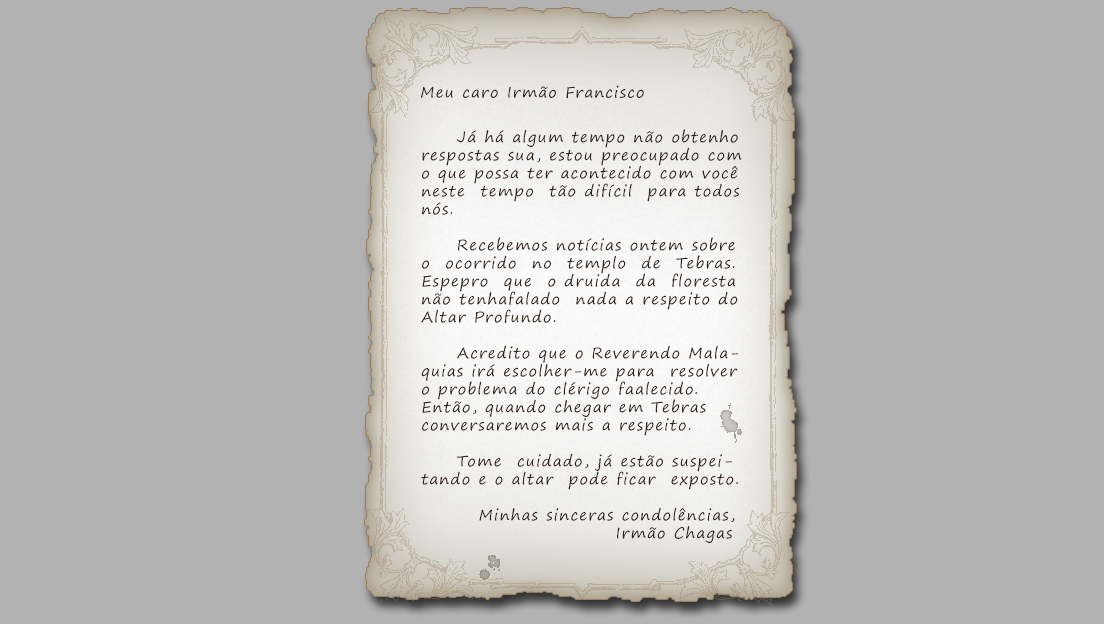
<style>
.page{position:relative;width:1104px;height:624px;background:#b2b2b2}
.page>*{position:absolute;margin:0}
.t1{font:15px "SegoePrint";letter-spacing:0.08em;color:#33241b}
</style>
<div class="page">
<p class="t1" style="left:421px;top:85px;width:223px;height:14px">Meu caro Irmão Francisco</p>
<p class="t1" style="left:421px;top:129px;width:321px;height:414px">Já há algum tempo não obtenho<br>respostas sua, estou preocupado com<br>o que possa ter acontecido com você <br>neste  tempo  tão difícil  para todos<br>nós.<br><br>     Recebemos notícias ontem sobre<br>o  ocorrido  no  templo  de  Tebras. <br>Espepro  que  o druida  da  floresta<br>não tenhafalado  nada a respeito do<br>Altar Profundo.<br><br>     Acredito que o Reverendo Mala-<br>quias irá escolher-me para  resolver<br>o problema do clérigo faalecido.<br>Então, quando chegar em Tebras <br>conversaremos mais a respeito.<br><br>     Tome  cuidado, já estão suspei-<br>tando e o altar  pode ficar  exposto.<br><br>        Minhas sinceras condolências,<br>                           Irmão Chagas</p>
</div>
